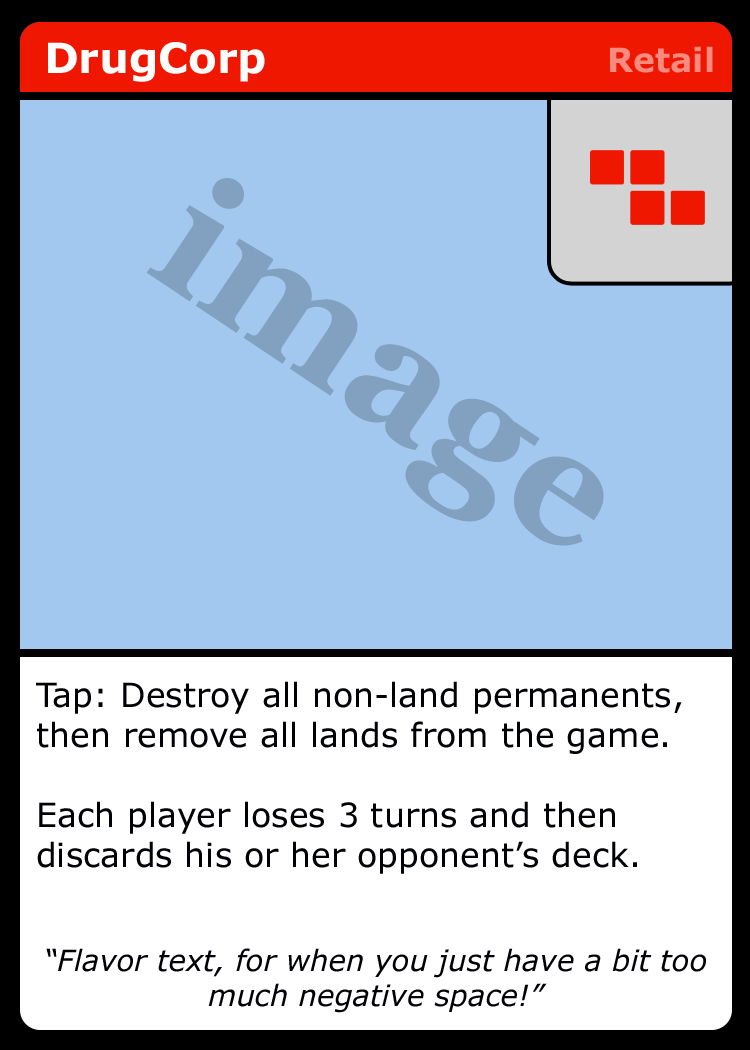
<style>
.page{position:relative;width:750px;height:1050px;background:#a2c8ef}
.page>*{position:absolute;margin:0}
.t1{font:41.7px "Verdana-Bold";color:#ffffff}
.t2{font:33.3px "Verdana-Bold";color:#f88b80}
.t3{font:166.7px "Georgia-Bold";color:#82a0bf}
.t4{font:33.3px "Verdana";color:#000104}
.t5{font:29.2px "Verdana-Italic";color:#000104}
</style>
<div class="page">
<p class="t1" style="left:48px;top:42px;width:217px;height:40px">DrugCorp</p>
<p class="t2" style="left:610px;top:46px;width:103px;height:27px">Retail</p>
<p class="t3" style="left:146px;top:178px;width:458px;height:368px;rotate:34deg">image</p>
<p class="t4" style="left:36px;top:681px;width:646px;height:193px">Tap: Destroy all non-land permanents, then remove all lands from the game. <br><br>Each player loses 3 turns and then discards his or her opponent’s deck.</p>
<p class="t5" style="left:46px;top:948px;width:660px;height:65px;text-align:center">“Flavor text, for when you just have a bit too much negative space!”</p>
</div>
